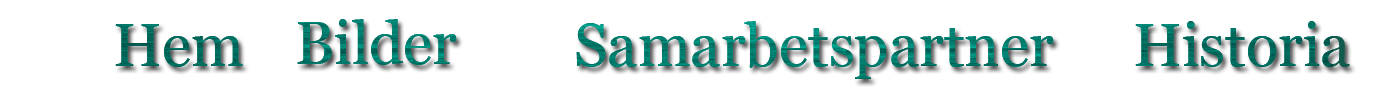
<style>
.page{position:relative;width:1400px;height:100px;background:#ffffff}
.page>*{position:absolute;margin:0}
.t1{font:60px "Georgia";color:#006a5d}
.t2{font:60px "Georgia";color:#187d6b}
.t3{font:60px "Georgia";color:#007c6d}
</style>
<div class="page">
<p class="t1" style="left:115px;top:24px;width:128px;height:43px">Hem</p>
<p class="t2" style="left:297px;top:19px;width:160px;height:46px">Bilder</p>
<p class="t3" style="left:576px;top:21px;width:478px;height:58px">Samarbetspartner</p>
<p class="t1" style="left:1135px;top:21px;width:215px;height:46px">Historia</p>
</div>
